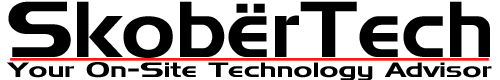
<style>
.page{position:relative;width:500px;height:80px;background:#ffffff}
.page>*{position:absolute;margin:0}
.t1{font:78.9px "Denmark";color:#000000;scale:1.04 1}
.t2{font:20.8px "Denmark";color:#000000;scale:1.39 1}
</style>
<div class="page">
<p class="t1" style="left:8px;top:1px;width:482px;height:57px">SkobërTech</p>
<p class="t2" style="left:7px;top:62px;width:485px;height:19px">Your On-Site Technology Advisor</p>
</div>
